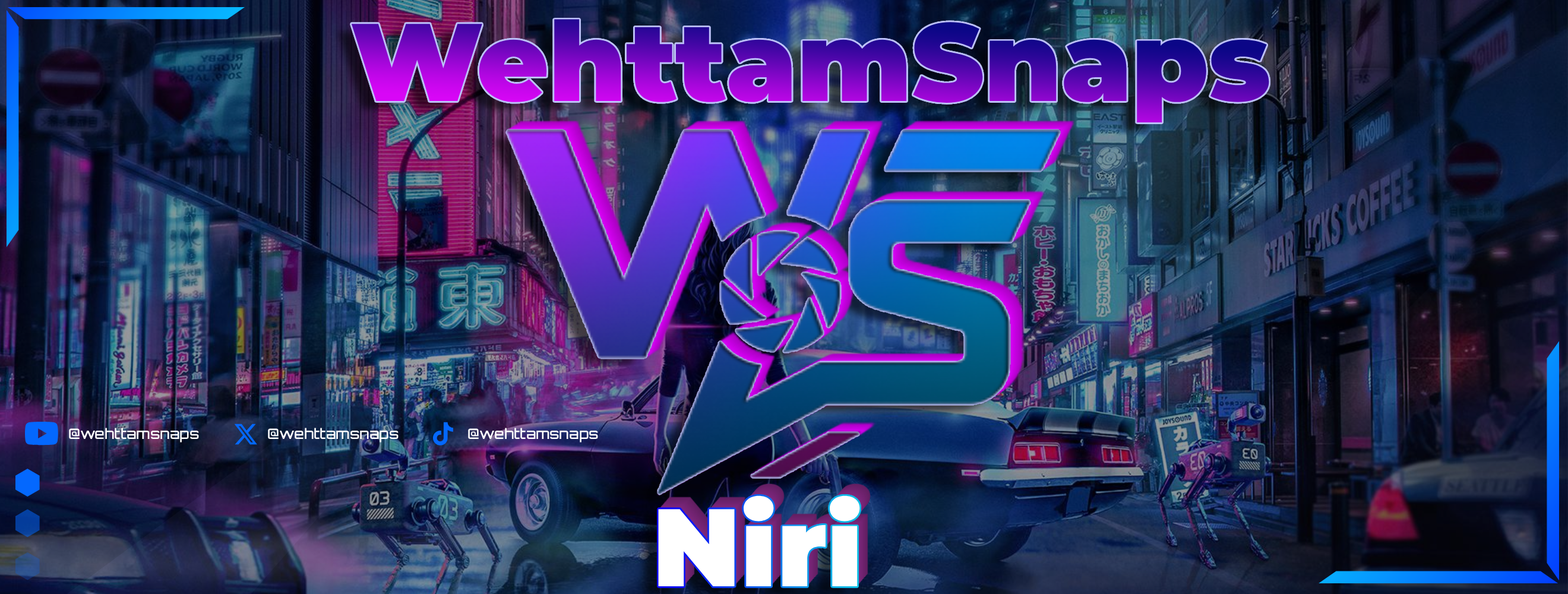
<style>
.page{position:relative;width:1568px;height:594px}
.page>*{position:absolute;margin:0}
.t1{font:110.1px "Montserrat-Black"}
.t2{font:14.3px "Orbitron-Medium";color:#ffffff}
.t3{font:110.1px "Montserrat-Black";color:#ffffff}
</style>
<div class="page">
<p class="t1" style="left:351px;top:19px;width:918px;height:103px">WehttamSnaps</p>
<p class="t2" style="left:69px;top:428px;width:130px;height:14px">@wehttamsnaps</p>
<p class="t2" style="left:268px;top:428px;width:131px;height:14px">@wehttamsnaps</p>
<p class="t2" style="left:468px;top:428px;width:130px;height:14px">@wehttamsnaps</p>
<p class="t3" style="left:658px;top:495px;width:202px;height:91px">Niri</p>
</div>
